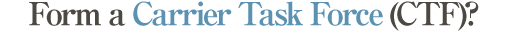
<style>
.page{position:relative;width:507px;height:31px;background:#ffffff}
.page>*{position:absolute;margin:0}
.t1{font:32px "RyuminPro-ExBold";letter-spacing:-0.08em;color:#5b92b2}
.t2{font:32px "RyuminPro-ExBold";letter-spacing:-0.08em;color:#4c4842}
</style>
<div class="page">
<p class="t1" style="left:29px;top:1px;width:450px;height:30px"><span class="t2">Form a </span>Carrier Task Force<span class="t2"> (CTF)?</span></p>
</div>
